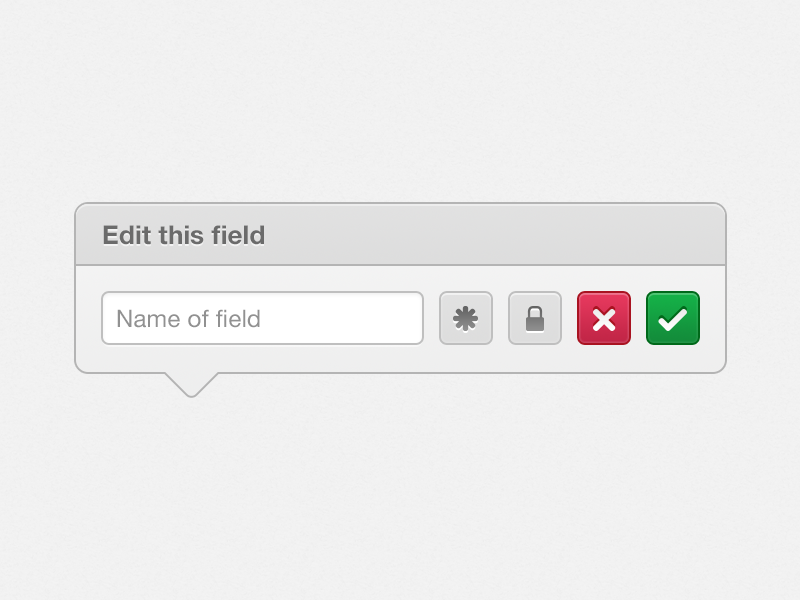
<style>
.page{position:relative;width:800px;height:600px;background:#f2f2f2}
.page>*{position:absolute;margin:0}
.t1{font:26px "HelveticaNeue-Bold";letter-spacing:0.005em;color:#6b6b6b}
.t2{font:24px "HelveticaNeue";letter-spacing:0.01em;color:#919191}
</style>
<div class="page">
<p class="t1" style="left:103px;top:225px;width:161px;height:20px">Edit this field</p>
<p class="t2" style="left:117px;top:309px;width:143px;height:19px">Name of field</p>
</div>
